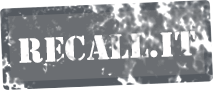
<style>
.page{position:relative;width:213px;height:90px;background:#6b6e72}
.page>*{position:absolute;margin:0}
.t1{font:36.6px "Stencil";color:#fffefe}
</style>
<div class="page">
<p class="t1" style="left:18px;top:31px;width:178px;height:32px;rotate:-2deg">RECALL.IT</p>
</div>
